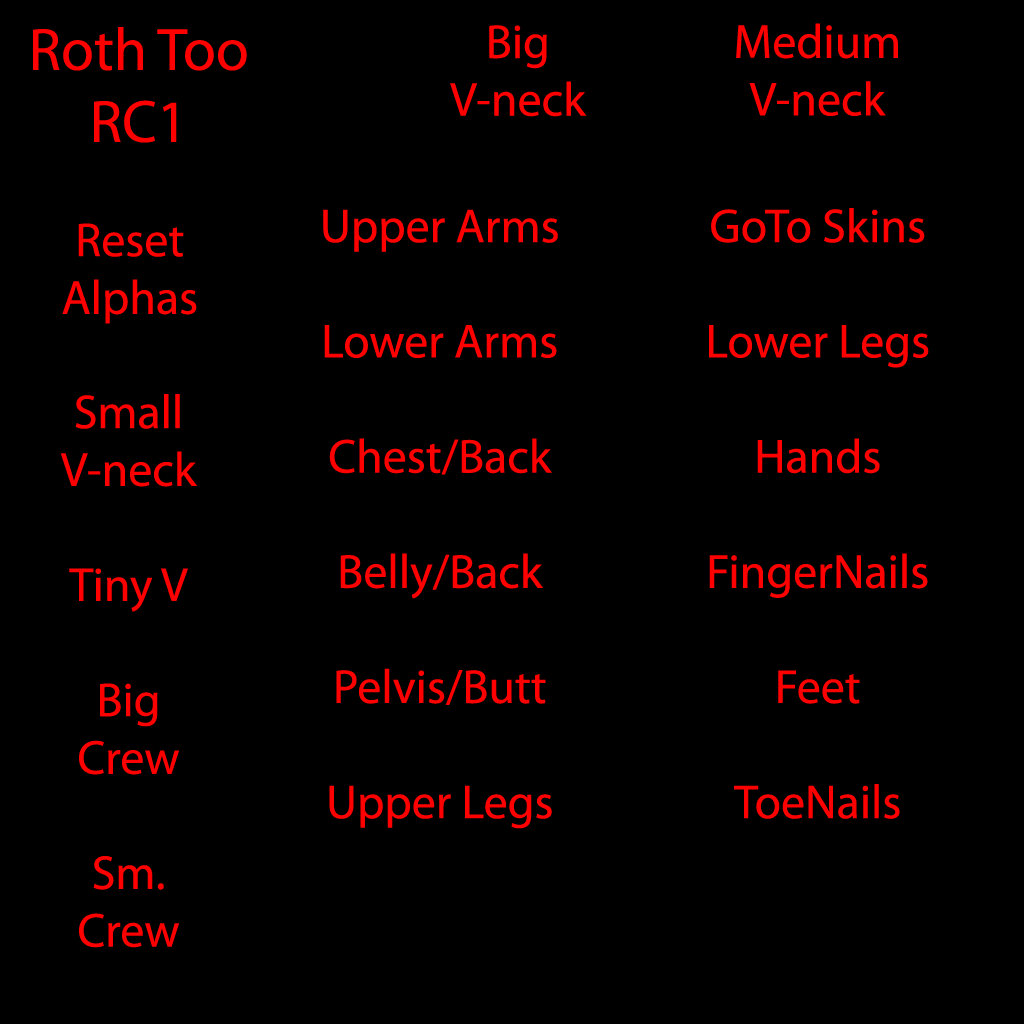
<style>
.page{position:relative;width:1024px;height:1024px;background:#000000}
.page>*{position:absolute;margin:0}
.t1{font:60px "MyriadPro-Regular";color:#ff0000}
.t2{font:48px "MyriadPro-Regular";color:#ff0000}
</style>
<div class="page">
<p class="t1" style="left:33px;top:27px;width:214px;height:116px;text-align:center">Roth Too<br>RC1</p>
<p class="t2" style="left:450px;top:25px;width:137px;height:92px;text-align:center">Big<br>V-neck</p>
<p class="t2" style="left:736px;top:23px;width:162px;height:93px;text-align:center">Medium<br>V-neck</p>
<p class="t2" style="left:323px;top:209px;width:235px;height:620px;text-align:center">Upper Arms<br><br>Lower Arms<br><br>Chest/Back<br><br>Belly/Back<br><br>Pelvis/Butt<br><br>Upper Legs</p>
<p class="t2" style="left:709px;top:208px;width:220px;height:611px;text-align:center">GoTo Skins<br><br>Lower Legs<br><br>Hands<br><br>FingerNails<br><br>Feet<br><br>ToeNails</p>
<p class="t2" style="left:62px;top:223px;width:135px;height:101px;text-align:center">Reset<br>Alphas</p>
<p class="t2" style="left:60px;top:394px;width:137px;height:554px;text-align:center">Small<br>V-neck<br><br>Tiny V<br><br>Big<br>Crew<br><br>Sm.<br>Crew</p>
</div>
